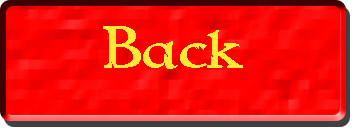
<style>
.page{position:relative;width:358px;height:135px}
.page>*{position:absolute;margin:0}
.t1{font:60px "Immortal";color:#ffe934}
</style>
<div class="page">
<p class="t1" style="left:103px;top:26px;width:140px;height:43px">Back</p>
</div>
